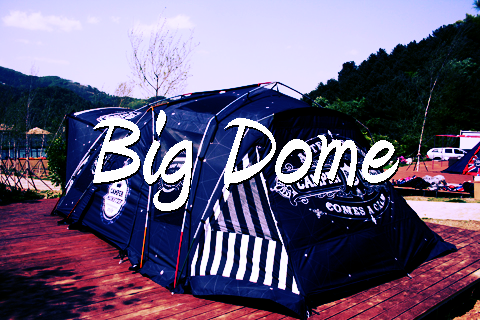
<style>
.page{position:relative;width:480px;height:320px}
.page>*{position:absolute;margin:0}
.t1{font:128px "Amienne-Bold";color:#ffffff}
</style>
<div class="page">
<p class="t1" style="left:93px;top:110px;width:306px;height:101px">Big Dome</p>
</div>
